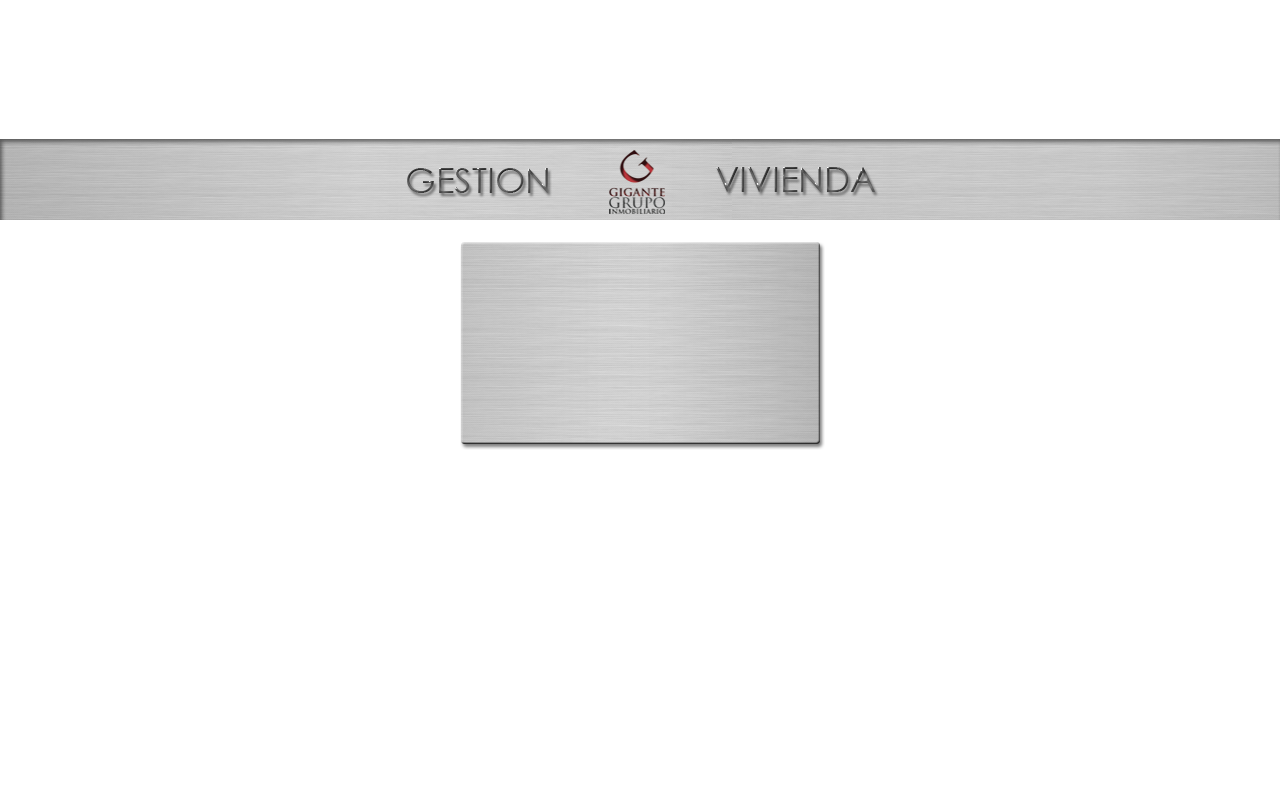
<style>
.page{position:relative;width:1280px;height:800px;background:#ffffff}
.page>*{position:absolute;margin:0}
.t1{font:35px "CenturyGothic";color:#3b3b3b}
.t2{font:35px "CenturyGothic"}
</style>
<div class="page">
<p class="t1" style="left:407px;top:168px;width:141px;height:25px">GESTION</p>
<p class="t2" style="left:716px;top:167px;width:159px;height:25px">VIVIENDA</p>
</div>
